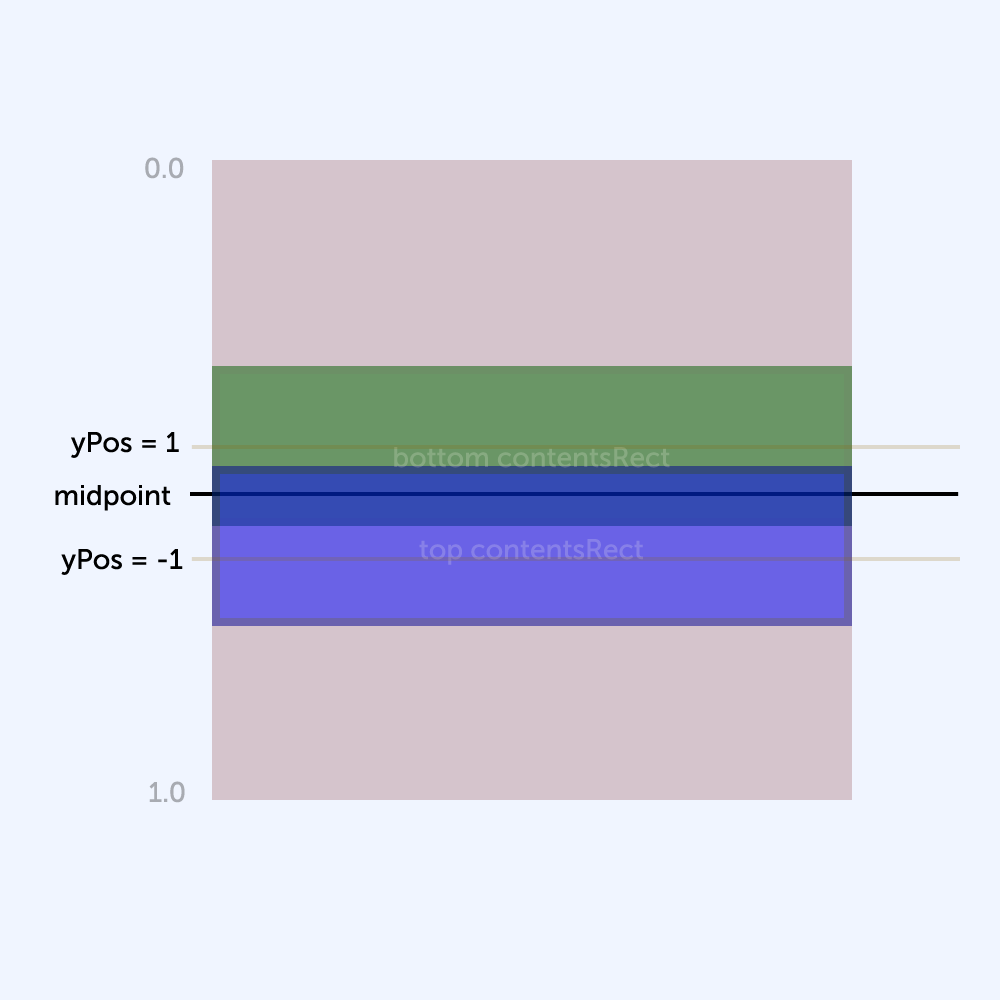
<style>
.page{position:relative;width:1000px;height:1000px;background:#f0f5ff}
.page>*{position:absolute;margin:0}
.t1{font:28px "MuseoSans-500";color:#a8abb2}
.t2{font:28px "MuseoSans-500";color:#000000}
.t3{font:28px "MuseoSans-500";color:#87aa81}
.t4{font:28px "MuseoSans-500";color:#8780e8}
</style>
<div class="page">
<p class="t1" style="left:145px;top:157px;width:39px;height:22px">0.0</p>
<p class="t2" style="left:71px;top:432px;width:108px;height:26px">yPos = 1</p>
<p class="t3" style="left:394px;top:447px;width:276px;height:21px">bottom contentsRect</p>
<p class="t2" style="left:55px;top:485px;width:116px;height:26px">midpoint</p>
<p class="t4" style="left:419px;top:539px;width:224px;height:26px">top contentsRect</p>
<p class="t2" style="left:61px;top:549px;width:122px;height:26px">yPos = -1</p>
<p class="t1" style="left:149px;top:781px;width:36px;height:22px">1.0</p>
</div>
